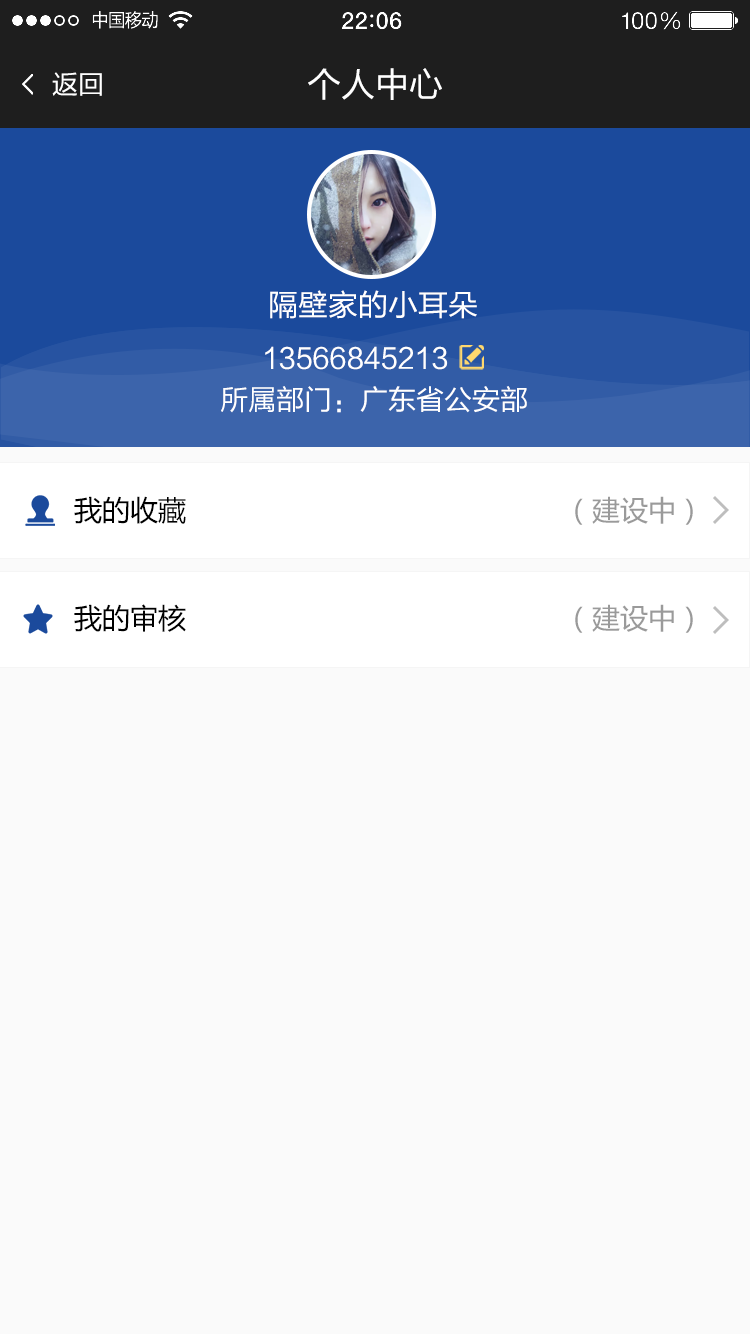
<style>
.page{position:relative;width:750px;height:1334px;background:#fafafa}
.page>*{position:absolute;margin:0}
.t1{font:26px "FZLTHJW--GB1-0";color:#ffffff}
.t2{font:34px "FZLTHJW--GB1-0";color:#ffffff}
.t3{font:30px "FZLTHJW--GB1-0";color:#ffffff}
.t4{font:28px "FZLTHJW--GB1-0";color:#ffffff}
.t5{font:28px/54px "MicrosoftYaHei";color:#000000}
.t6{font:28px/54px "MicrosoftYaHei";color:#9a9a9a}
</style>
<div class="page">
<p class="t1" style="left:52px;top:72px;width:50px;height:24px">返回</p>
<p class="t2" style="left:308px;top:68px;width:134px;height:32px">个人中心</p>
<p class="t3" style="left:270px;top:290px;width:207px;height:29px">隔壁家的小耳朵</p>
<p class="t4" style="left:265px;top:346px;width:183px;height:24px">13566845213</p>
<p class="t4" style="left:221px;top:386px;width:306px;height:27px">所属部门：广东省公安部</p>
<p class="t5" style="left:74px;top:496px;width:112px;height:136px">我的收藏<br><br>我的审核</p>
<p class="t6" style="left:575px;top:496px;width:118px;height:137px">（建设中）<br><br>（建设中）</p>
</div>
